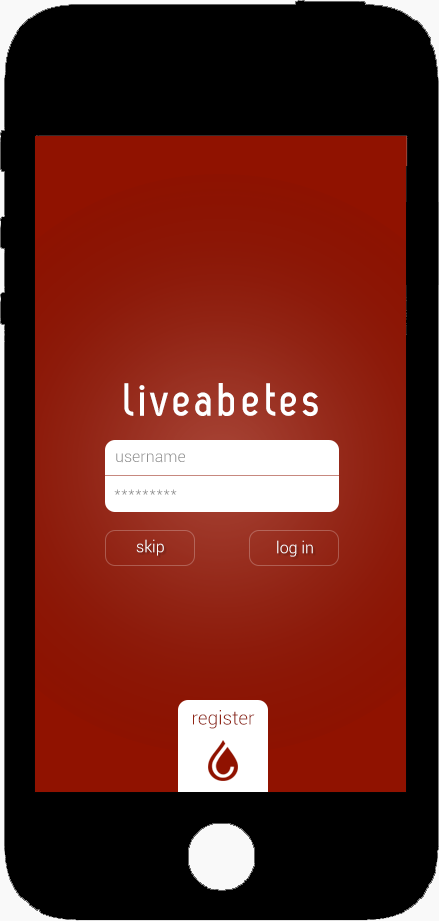
<style>
.page{position:relative;width:439px;height:921px;background:#000000}
.page>*{position:absolute;margin:0}
.t1{font:48px "ZagBold";letter-spacing:0.08em;color:#ffffff}
.t2{font:16px "Roboto-Light";color:#8d8d8d}
.t3{font:16px "Roboto-Light";letter-spacing:0.015em;color:#8d8d8d}
.t4{font:16px "Roboto-Light";color:#ffffff}
.t5{font:19px "Roboto-Light";color:#912313}
</style>
<div class="page">
<p class="t1" style="left:124px;top:383px;width:194px;height:34px">liveabetes</p>
<p class="t2" style="left:116px;top:453px;width:69px;height:10px">username</p>
<p class="t3" style="left:114px;top:489px;width:63px;height:6px">*********</p>
<p class="t4" style="left:136px;top:539px;width:28px;height:17px">skip</p>
<p class="t4" style="left:277px;top:540px;width:36px;height:17px">log in</p>
<p class="t5" style="left:193px;top:710px;width:62px;height:19px">register</p>
</div>
